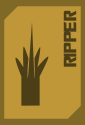
<style>
.page{position:relative;width:85px;height:125px;background:#bf9739}
.page>*{position:absolute;margin:0}
.t1{font:20px "TransformersMovie";color:#4c3f17}
</style>
<div class="page">
<p class="t1" style="left:63px;top:10px;width:14px;height:57px;rotate:-90deg">ripper</p>
</div>
